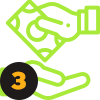
<style>
.page{position:relative;width:100px;height:100px;background:#ffffff}
.page>*{position:absolute;margin:0}
.t1{font:24px "ChunkFive-Roman";color:#fcaf17;font-weight:bold;scale:1.15 1}
</style>
<div class="page">
<p class="t1" style="left:11px;top:71px;width:15px;height:19px">3</p>
<p class="t1" style="left:12px;top:72px;width:13px;height:18px">1</p>
</div>
